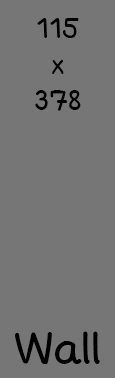
<style>
.page{position:relative;width:115px;height:378px;background:#767676}
.page>*{position:absolute;margin:0}
.t1{font:30px "korbau-Medium";color:#000000}
.t2{font:48px "korbau-Medium";color:#000000}
</style>
<div class="page">
<p class="t1" style="left:35px;top:18px;width:46px;height:93px;text-align:center">115<br>x<br>378</p>
<p class="t2" style="left:15px;top:331px;width:85px;height:33px">Wall</p>
</div>
